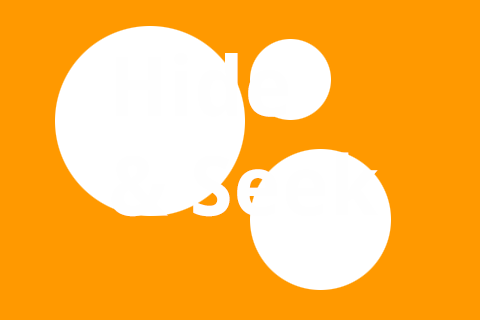
<style>
.page{position:relative;width:480px;height:320px;background:#ff9900}
.page>*{position:absolute;margin:0}
.t1{font:83px "DroidSans-Bold";color:#fefefe}
</style>
<div class="page">
<p class="t1" style="left:111px;top:53px;width:268px;height:164px">Hide<br>&amp; Seek</p>
</div>
